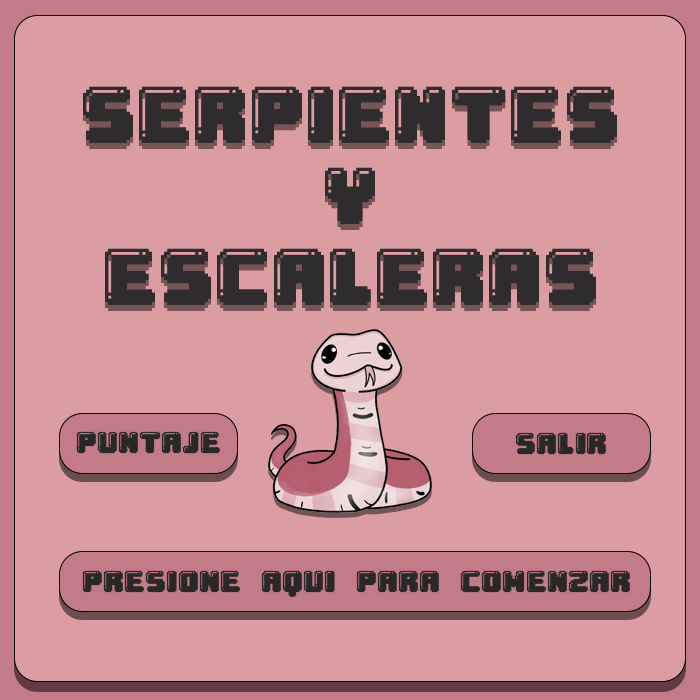
<style>
.page{position:relative;width:700px;height:700px;background:#db9da1}
.page>*{position:absolute;margin:0}
.t1{font:37.5px "Gumball";color:#282828}
</style>
<div class="page">
<p class="t1" style="left:76px;top:431px;width:144px;height:23px">PUNTAJE</p>
<p class="t1" style="left:515px;top:432px;width:91px;height:23px">SALIR</p>
<p class="t1" style="left:82px;top:570px;width:548px;height:27px">PRESIONE AQUI PARA COMENZAR</p>
</div>
